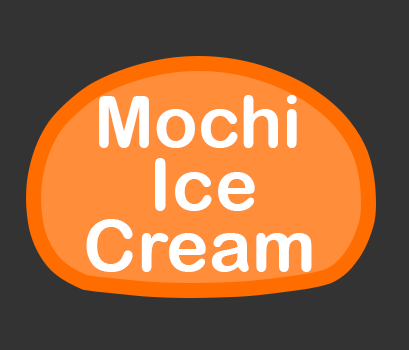
<style>
.page{position:relative;width:409px;height:350px;background:#333333}
.page>*{position:absolute;margin:0}
.t1{font:72px "ArialRoundedMTBold";color:#ffffff}
</style>
<div class="page">
<p class="t1" style="left:99px;top:95px;width:198px;height:53px">Mochi</p>
<p class="t1" style="left:155px;top:158px;width:100px;height:53px">Ice</p>
<p class="t1" style="left:86px;top:219px;width:226px;height:53px">Cream</p>
</div>
